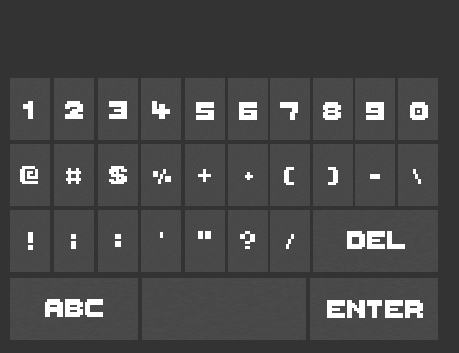
<style>
.page{position:relative;width:459px;height:353px;background:#333333}
.page>*{position:absolute;margin:0}
.t1{font:40px "ThaleahFat";color:#ffffff}
</style>
<div class="page">
<p class="t1" style="left:23px;top:101px;width:10px;height:18px">1</p>
<p class="t1" style="left:65px;top:101px;width:18px;height:18px">2</p>
<p class="t1" style="left:109px;top:101px;width:18px;height:18px">3</p>
<p class="t1" style="left:152px;top:101px;width:18px;height:18px">4</p>
<p class="t1" style="left:196px;top:102px;width:18px;height:18px">5</p>
<p class="t1" style="left:239px;top:102px;width:18px;height:18px">6</p>
<p class="t1" style="left:280px;top:102px;width:18px;height:18px">7</p>
<p class="t1" style="left:323px;top:102px;width:18px;height:18px">8</p>
<p class="t1" style="left:366px;top:102px;width:18px;height:18px">9</p>
<p class="t1" style="left:410px;top:102px;width:18px;height:18px">0</p>
<p class="t1" style="left:20px;top:166px;width:18px;height:18px">@</p>
<p class="t1" style="left:66px;top:168px;width:15px;height:16px">#</p>
<p class="t1" style="left:109px;top:166px;width:18px;height:18px">$</p>
<p class="t1" style="left:153px;top:169px;width:18px;height:15px">%</p>
<p class="t1" style="left:198px;top:169px;width:13px;height:13px">&amp;</p>
<p class="t1" style="left:245px;top:172px;width:8px;height:8px">*</p>
<p class="t1" style="left:284px;top:167px;width:10px;height:18px">(</p>
<p class="t1" style="left:328px;top:167px;width:10px;height:18px">)</p>
<p class="t1" style="left:413px;top:169px;width:8px;height:15px">\</p>
<p class="t1" style="left:28px;top:232px;width:5px;height:18px">!</p>
<p class="t1" style="left:198px;top:231px;width:13px;height:8px">"</p>
<p class="t1" style="left:240px;top:231px;width:15px;height:18px">?</p>
<p class="t1" style="left:347px;top:231px;width:58px;height:18px">DEL</p>
<p class="t1" style="left:71px;top:234px;width:5px;height:15px">;</p>
<p class="t1" style="left:115px;top:234px;width:6px;height:13px">:</p>
<p class="t1" style="left:286px;top:234px;width:8px;height:15px">/</p>
<p class="t1" style="left:45px;top:299px;width:58px;height:18px">ABC</p>
<p class="t1" style="left:327px;top:300px;width:96px;height:18px">ENTER</p>
</div>
